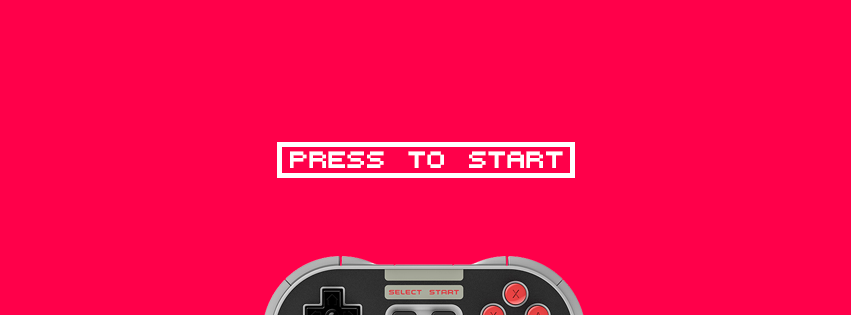
<style>
.page{position:relative;width:851px;height:315px;background:#ff004a}
.page>*{position:absolute;margin:0}
.t1{font:27px "LilliputSteps-Regular";color:#ffffff}
</style>
<div class="page">
<p class="t1" style="left:290px;top:151px;width:273px;height:17px">PRESS TO START</p>
</div>
